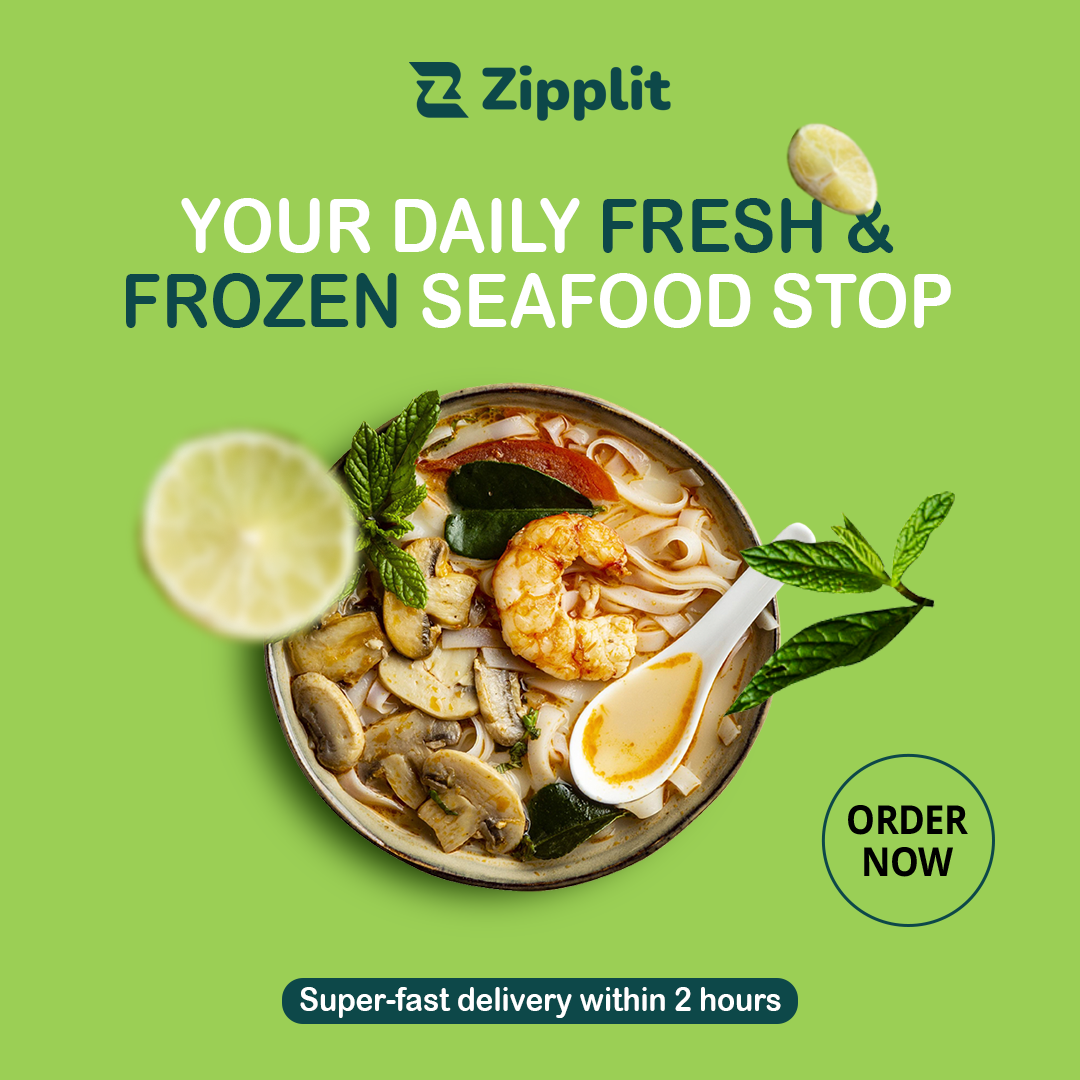
<style>
.page{position:relative;width:1080px;height:1080px;background:#9bcf55}
.page>*{position:absolute;margin:0}
.t1{font:74px/74.8px "ArialRoundedMTBold";color:#0d4849;text-transform:uppercase;scale:0.91 1}
.t2{font:74px/74.8px "ArialRoundedMTBold";color:#ffffff;text-transform:uppercase;scale:0.91 1}
.t3{font:40px/41.9px "OpenSans-Bold";letter-spacing:-0.02em;color:#000000;scale:0.91 1}
.t4{font:32.9px "ArialRoundedMTBold";color:#ffffff;scale:0.91 1}
</style>
<div class="page">
<p class="t1" style="left:126px;top:198px;width:825px;height:130px;text-align:center"><span class="t2">Your Daily </span>Fresh &amp;<br>Frozen<span class="t2"> Seafood Stop</span></p>
<p class="t3" style="left:848px;top:805px;width:120px;height:72px;text-align:center">ORDER<br>NOW</p>
<p class="t4" style="left:300px;top:987px;width:481px;height:31px">Super-fast delivery within 2 hours</p>
</div>
